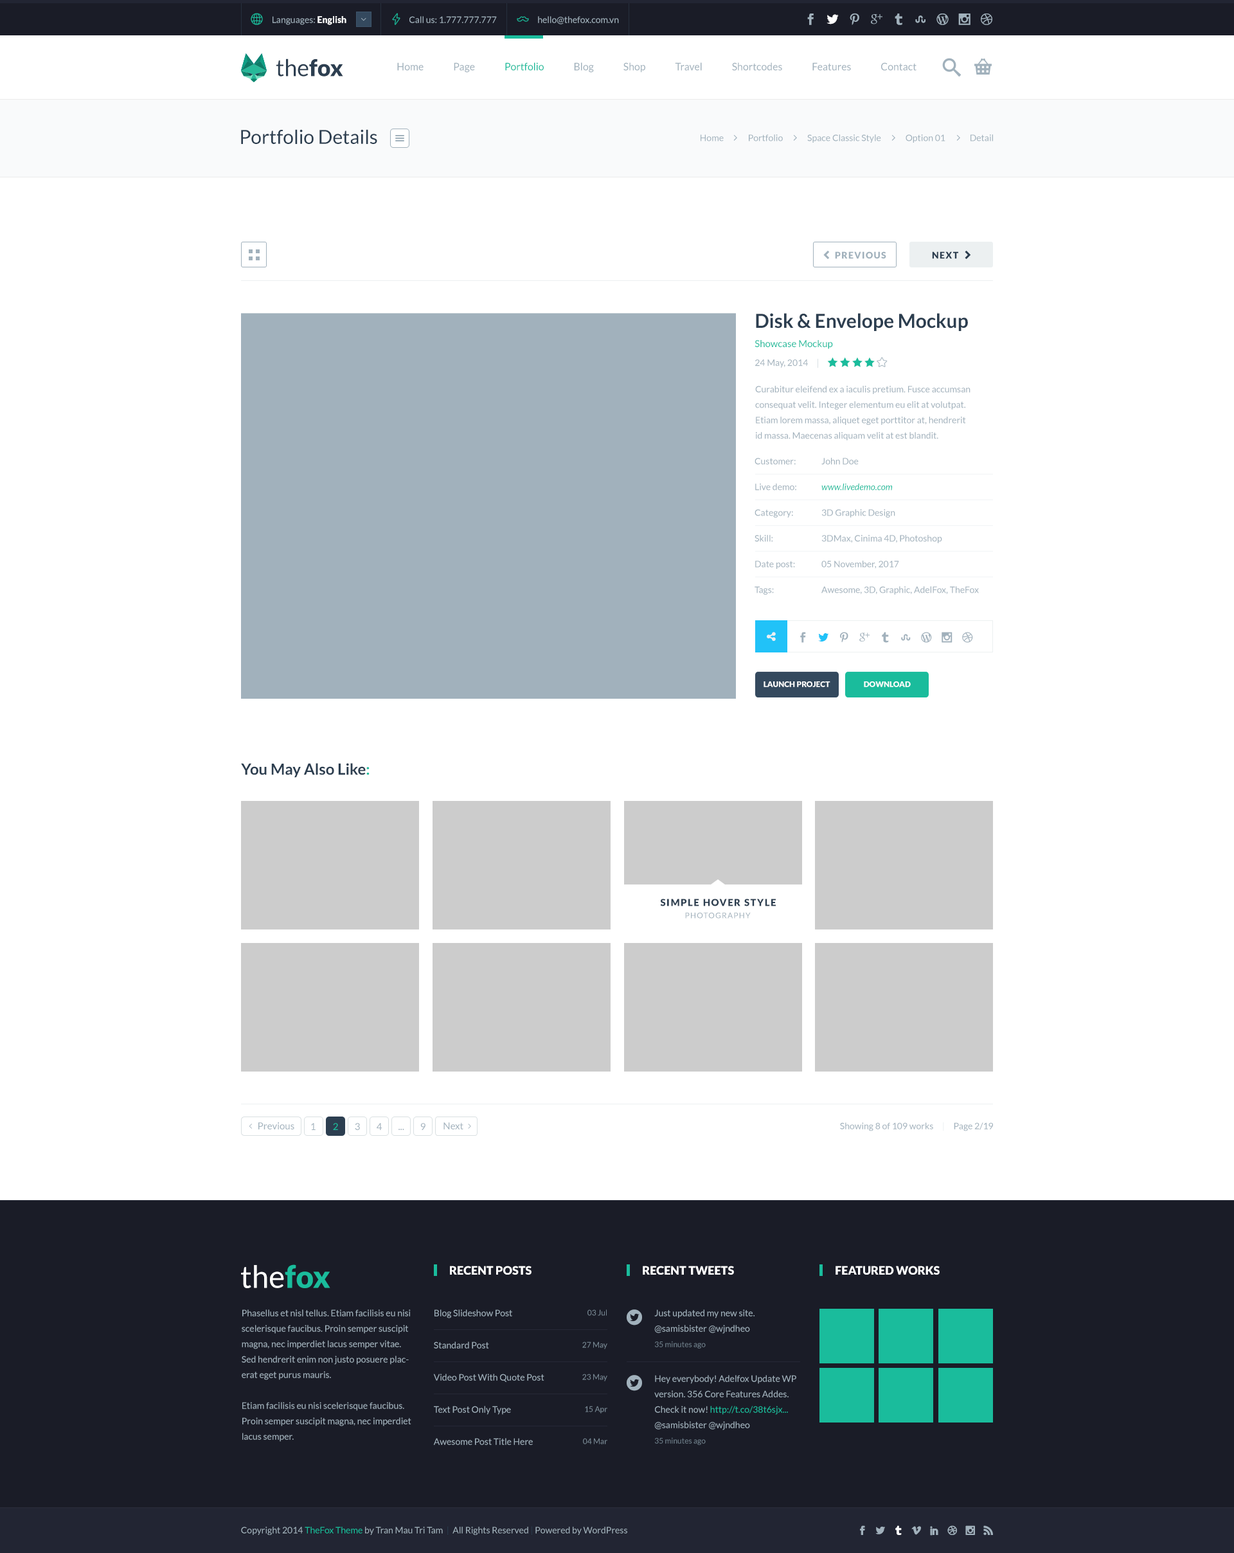
<style>
.page{position:relative;width:1234px;height:1553px;background:#ffffff}
.page>*{position:absolute;margin:0}
.t1{font:9px "Lato-Regular";color:#a1b1bc}
.t2{font:9px "Lato-Black";color:#ffffff}
.t3{font:23.1px "Lato-Regular";color:#2c3e50}
.t4{font:23.1px "Lato-Black";color:#2c3e50}
.t5{font:10.3px "Lato-Regular";color:#a1b1bc}
.t6{font:10.3px "Lato-Regular";color:#1abc9c}
.t7{font:19.3px "Lato-Regular";color:#2c3e50}
.t8{font:9px "Lato-Black";letter-spacing:0.1em;color:#a1b1bc}
.t9{font:9px "Lato-Black";letter-spacing:0.1em;color:#2c3e50}
.t10{font:19.3px/19.3px "Lato-Bold";color:#2c3e50}
.t11{font:9.6px/19.3px "Lato-Regular";color:#1abc9c}
.t12{font:9px/15.4px "Lato-Regular";color:#a1b1bc}
.t13{font:9px/25.7px "Lato-Regular";color:#a1b1bc}
.t14{font:9px/25.7px "Lato-Italic";color:#1abc9c}
.t15{font:7.7px "Lato-Black";color:#ffffff;text-transform:uppercase}
.t16{font:15.4px "Lato-Bold";color:#2c3e50}
.t17{font:15.4px "Lato-Bold";color:#1abc9c}
.t18{font:9.6px "Lato-Black";letter-spacing:0.1em;color:#2c3e50}
.t19{font:7.7px "Lato-Regular";letter-spacing:0.1em;color:#a1b1bc}
.t20{font:9.6px "Lato-Regular";color:#a1b1bc}
.t21{font:9.6px "Lato-Regular";color:#1abc9c}
.t22{font:9px "Lato-Regular";color:#ecf0f1}
.t23{font:30.9px "Lato-Regular";color:#ffffff}
.t24{font:30.9px "Lato-Black";color:#1abc9c}
.t25{font:11.6px "Lato-Black";color:#ffffff}
.t26{font:9px/32.1px "Lato-Regular";color:#a1b1bc}
.t27{font:7.7px/32.1px "Lato-Regular";color:#788894}
.t28{font:7.7px/15.4px "Lato-Regular";color:#6d7d89}
.t29{font:9px/15.4px "Lato-Regular";color:#1abc9c}
.t30{font:9px "Lato-Regular";color:#1abc9c}
.t31{font:9px "Lato-Regular";color:#2c3e50}
</style>
<div class="page">
<p class="t1" style="left:273px;top:16px;width:73px;height:9px">Languages: <span class="t2">English</span></p>
<p class="t1" style="left:410px;top:16px;width:87px;height:7px">Call us: 1.777.777.777</p>
<p class="t1" style="left:538px;top:16px;width:81px;height:8px">hello@thefox.com.vn</p>
<p class="t3" style="left:276px;top:59px;width:67px;height:17px">the<span class="t4">fox</span></p>
<p class="t5" style="left:397px;top:62px;width:520px;height:11px">Home               Page               <span class="t6">Portfolio</span>               Blog               Shop               Travel               Shortcodes               Features               Contact</p>
<p class="t7" style="left:241px;top:129px;width:136px;height:15px">Portfolio Details</p>
<p class="t1" style="left:701px;top:134px;width:292px;height:9px">Home              Portfolio              Space Classic Style              Option 01              Detail</p>
<p class="t8" style="left:835px;top:251px;width:52px;height:8px">PREVIOUS</p>
<p class="t9" style="left:932px;top:251px;width:27px;height:8px">NEXT</p>
<p class="t10" style="left:755px;top:313px;width:213px;height:36px">Disk &amp; Envelope Mockup<br><span class="t11">Showcase Mockup</span></p>
<p class="t1" style="left:755px;top:359px;width:53px;height:9px">24 May, 2014</p>
<p class="t12" style="left:755px;top:386px;width:216px;height:54px">Curabitur eleifend ex a iaculis pretium. Fusce accumsan consequat velit. Integer elementum eu elit at volutpat. Etiam lorem massa, aliquet eget porttitor at, hendrerit id massa. Maecenas aliquam velit at est blandit.</p>
<p class="t13" style="left:755px;top:458px;width:42px;height:137px">Customer:<br>Live demo:<br>Category:<br>Skill:<br>Date post:<br>Tags:</p>
<p class="t13" style="left:822px;top:458px;width:157px;height:137px">John Doe<br><span class="t14">www.livedemo.com<br></span>3D Graphic Design<br>3DMax, Cinima 4D, Photoshop<br>05 November, 2017<br>Awesome, 3D, Graphic, AdelFox, TheFox</p>
<p class="t15" style="left:764px;top:681px;width:67px;height:6px">Launch Project</p>
<p class="t15" style="left:864px;top:681px;width:47px;height:6px">DOWNLOAD</p>
<p class="t16" style="left:241px;top:763px;width:129px;height:15px">You May Also Like<span class="t17">:</span></p>
<p class="t18" style="left:660px;top:899px;width:116px;height:7px">SIMPLE HOVER STYLE</p>
<p class="t19" style="left:685px;top:912px;width:66px;height:7px">PHOTOGRAPHY</p>
<p class="t20" style="left:258px;top:1122px;width:36px;height:8px">Previous</p>
<p class="t20" style="left:311px;top:1123px;width:5px;height:7px">1</p>
<p class="t21" style="left:333px;top:1123px;width:5px;height:7px">2</p>
<p class="t20" style="left:355px;top:1123px;width:5px;height:7px">3</p>
<p class="t20" style="left:377px;top:1123px;width:5px;height:7px">4</p>
<p class="t20" style="left:399px;top:1129px;width:5px;height:1px">...</p>
<p class="t20" style="left:420px;top:1123px;width:6px;height:7px">9</p>
<p class="t20" style="left:444px;top:1122px;width:20px;height:8px">Next</p>
<p class="t1" style="left:840px;top:1122px;width:153px;height:9px">Showing 8 of 109 works<span class="t22">     |     </span>Page 2/19</p>
<p class="t23" style="left:241px;top:1264px;width:89px;height:24px">the<span class="t24">fox</span></p>
<p class="t25" style="left:450px;top:1266px;width:82px;height:9px">RECENT POSTS</p>
<p class="t25" style="left:643px;top:1266px;width:91px;height:9px">RECENT TWEETS</p>
<p class="t25" style="left:836px;top:1266px;width:104px;height:9px">FEATURED WORKS</p>
<p class="t12" style="left:242px;top:1310px;width:169px;height:132px">Phasellus et nisl tellus. Etiam facilisis eu nisi scelerisque faucibus. Proin semper suscipit magna, nec imperdiet lacus semper vitae. Sed hendrerit enim non justo posuere placerat eget purus mauris.<br><br>Etiam facilisis eu nisi scelerisque faucibus. Proin semper suscipit magna, nec imperdiet lacus semper.</p>
<p class="t26" style="left:433px;top:1310px;width:111px;height:135px">Blog Slideshow Post<br>Standard Post<br>Video Post With Quote Post<br>Text Post Only Type<br>Awesome Post Title Here</p>
<p class="t27" style="left:582px;top:1310px;width:26px;height:134px;text-align:right">03 Jul<br>27 May<br>23 May<br>15 Apr<br>04 Mar</p>
<p class="t12" style="left:654px;top:1310px;width:101px;height:39px">Just updated my new site. <br>@samisbister @wjndheo<br><span class="t28">35 minutes ago</span></p>
<p class="t12" style="left:654px;top:1375px;width:143px;height:70px">Hey everybody! Adelfox Update WP version. 356 Core Features Addes. Check it now! <span class="t29">http://t.co/38t6sjx...<br></span>@samisbister @wjndheo<br><span class="t28">35 minutes ago</span></p>
<p class="t1" style="left:241px;top:1526px;width:386px;height:9px">Copyright 2014 <span class="t30">TheFox Theme</span> by Tran Mau Tri Tam <span class="t31"> |  </span>All Rights Reserved<span class="t31"> | </span>Powered by WordPress</p>
</div>
